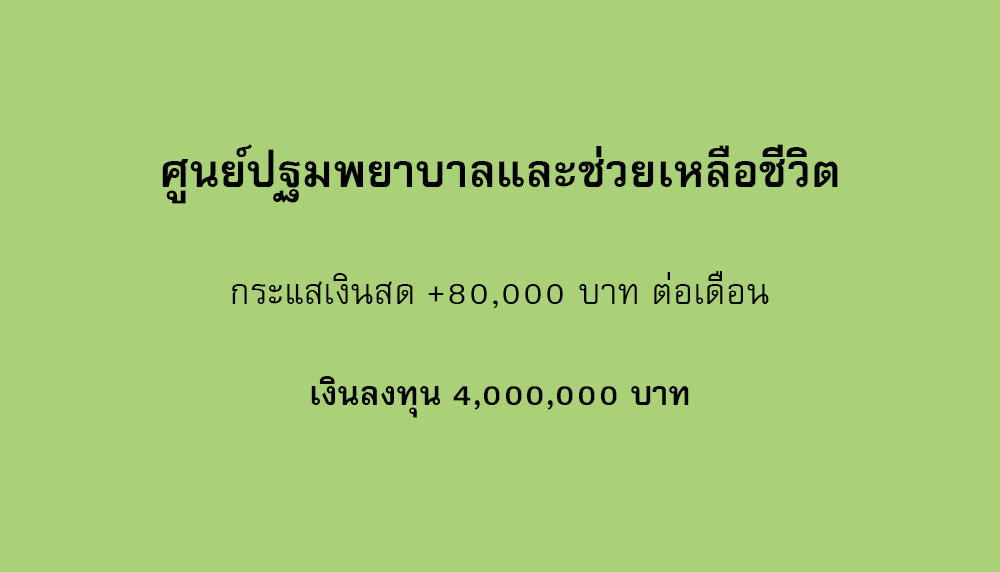
<style>
.page{position:relative;width:1000px;height:572px;background:#aad178}
.page>*{position:absolute;margin:0}
.t1{font:64px "FreesiaUPCBold";color:#000000}
.t2{font:50px "FreesiaUPC";color:#000000}
.t3{font:47px "FreesiaUPCBold";color:#000000}
</style>
<div class="page">
<p class="t1" style="left:162px;top:144px;width:676px;height:60px">ศูนย์ปฐมพยาบาลและช่วยเหลือชีวิต</p>
<p class="t2" style="left:232px;top:271px;width:537px;height:38px">กระแสเงินสด +80,000 บาท ต่อเดือน</p>
<p class="t3" style="left:311px;top:376px;width:378px;height:42px">เงินลงทุน 4,000,000 บาท</p>
</div>
